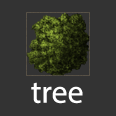
<style>
.page{position:relative;width:116px;height:116px;background:#333333}
.page>*{position:absolute;margin:0}
.t1{font:32px "MyriadPro-Regular";color:#ffffff}
</style>
<div class="page">
<p class="t1" style="left:31px;top:82px;width:52px;height:22px">tree</p>
</div>
